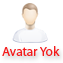
<style>
.page{position:relative;width:63px;height:63px;background:#ffffff}
.page>*{position:absolute;margin:0}
.t1{font:13.2px "MyriadPro-Regular";color:#f41b1b}
</style>
<div class="page">
<p class="t1" style="left:2px;top:46px;width:58px;height:10px">Avatar Yok</p>
</div>
